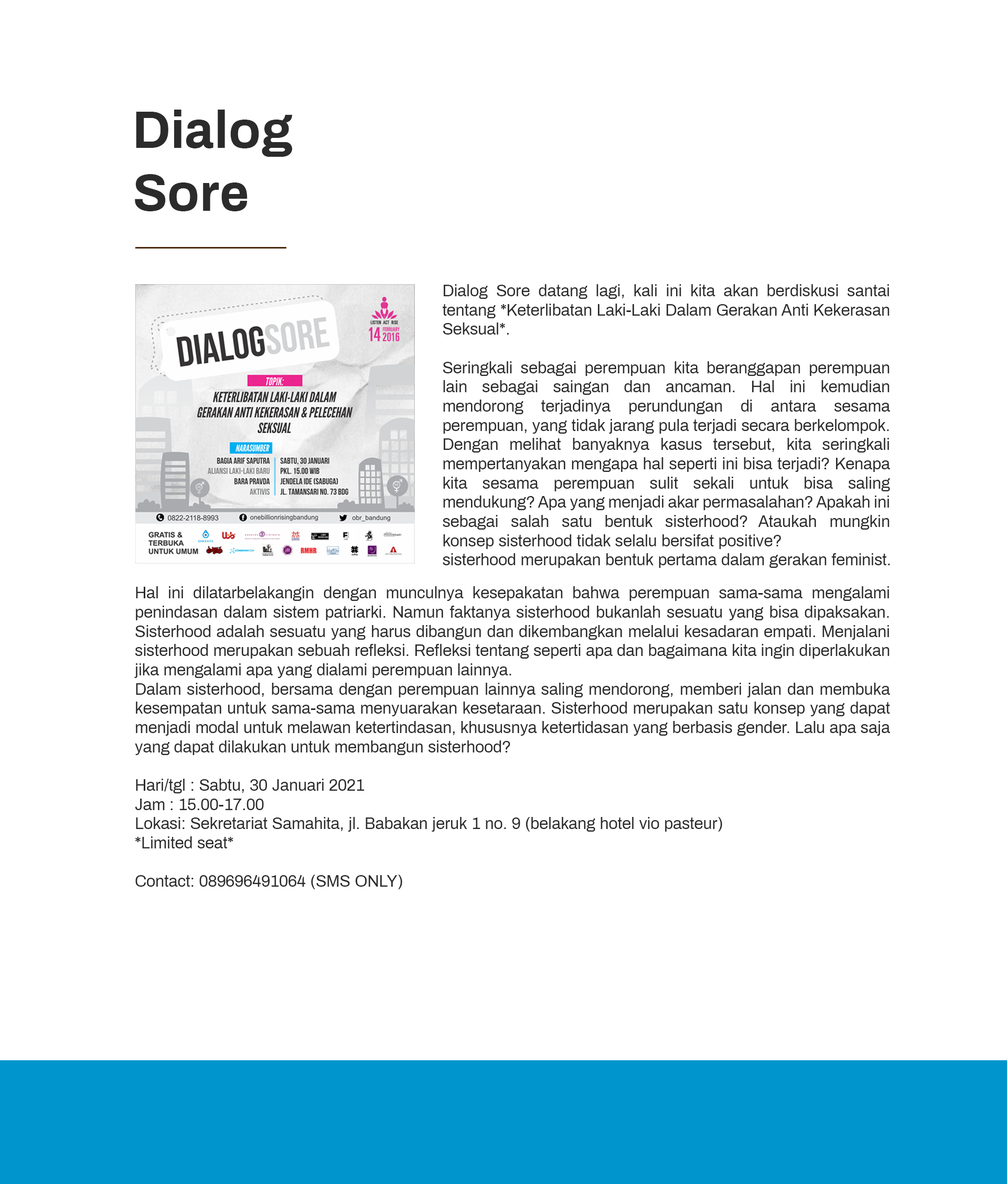
<style>
.page{position:relative;width:1007px;height:1184px;background:#ffffff}
.page>*{position:absolute;margin:0}
.t1{font:52.4px "Archivo-Bold";color:#2b2b2b}
.t2{font:16px "Archivo-Regular";color:#2b2b2b}
</style>
<div class="page">
<p class="t1" style="left:135px;top:110px;width:157px;height:101px">Dialog<br>Sore</p>
<p class="t2" style="left:443px;top:284px;width:447px;height:284px;text-align:justify">Dialog Sore datang lagi, kali ini kita akan berdiskusi santai tentang *Keterlibatan Laki-Laki Dalam Gerakan Anti Kekerasan Seksual*.<br><br>Seringkali sebagai perempuan kita beranggapan perempuan lain sebagai saingan dan ancaman. Hal ini kemudian mendorong terjadinya perundungan di antara sesama perempuan, yang tidak jarang pula terjadi secara berkelompok. Dengan melihat banyaknya kasus tersebut, kita seringkali mempertanyakan mengapa hal seperti ini bisa terjadi? Kenapa kita sesama perempuan sulit sekali untuk bisa saling mendukung? Apa yang menjadi akar permasalahan? Apakah ini sebagai salah satu bentuk sisterhood? Ataukah mungkin konsep sisterhood tidak selalu bersifat positive?<br>sisterhood merupakan bentuk pertama dalam gerakan feminist.</p>
<p class="t2" style="left:134px;top:586px;width:756px;height:303px;text-align:justify">Hal ini dilatarbelakangin dengan munculnya kesepakatan bahwa perempuan sama-sama mengalami penindasan dalam sistem patriarki. Namun faktanya sisterhood bukanlah sesuatu yang bisa dipaksakan. Sisterhood adalah sesuatu yang harus dibangun dan dikembangkan melalui kesadaran empati. Menjalani sisterhood merupakan sebuah refleksi. Refleksi tentang seperti apa dan bagaimana kita ingin diperlakukan jika mengalami apa yang dialami perempuan lainnya.<br>Dalam sisterhood, bersama dengan perempuan lainnya saling mendorong, memberi jalan dan membuka kesempatan untuk sama-sama menyuarakan kesetaraan. Sisterhood merupakan satu konsep yang dapat menjadi modal untuk melawan ketertindasan, khususnya ketertidasan yang berbasis gender. Lalu apa saja yang dapat dilakukan untuk membangun sisterhood?<br><br>Hari/tgl : Sabtu, 30 Januari 2021<br>Jam : 15.00-17.00<br>Lokasi: Sekretariat Samahita, jl. Babakan jeruk 1 no. 9 (belakang hotel vio pasteur)<br>*Limited seat*<br><br>Contact: 089696491064 (SMS ONLY)</p>
</div>
